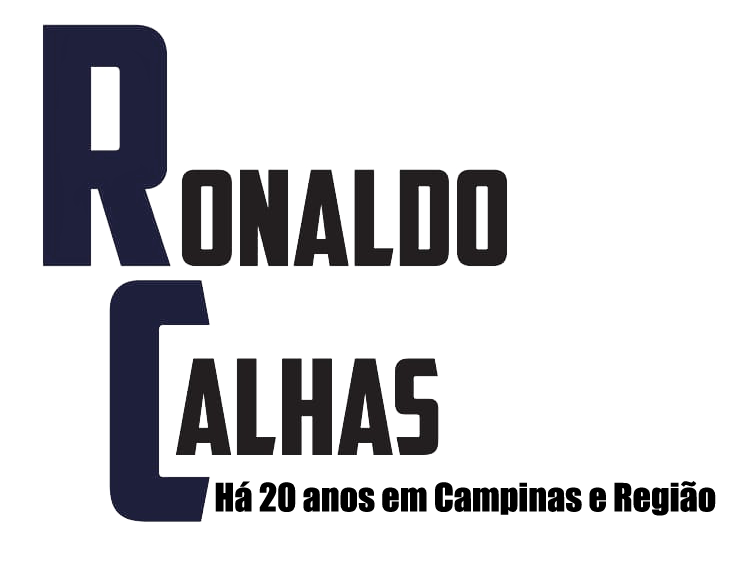
<style>
.page{position:relative;width:731px;height:567px;background:#ffffff}
.page>*{position:absolute;margin:0}
.t1{font:36px "Impact";color:#000000}
</style>
<div class="page">
<p class="t1" style="left:215px;top:481px;width:501px;height:35px">Há 20 anos em Campinas e Região</p>
</div>
